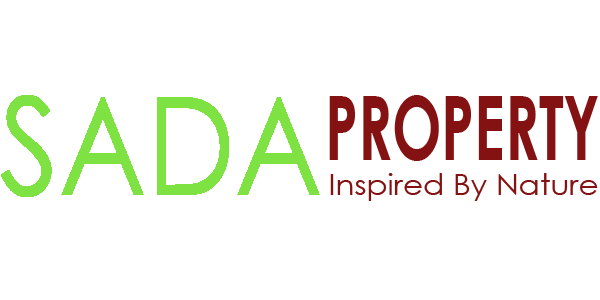
<style>
.page{position:relative;width:600px;height:300px;background:#ffffff}
.page>*{position:absolute;margin:0}
.t1{font:89.1px "CenturyGothic-Bold";color:#851212;scale:0.66 1}
.t2{font:29.4px "CenturyGothic";color:#851212;scale:1.05 1}
</style>
<div class="page">
<p class="t1" style="left:329px;top:95px;width:269px;height:66px">PROPERTY</p>
<p class="t2" style="left:330px;top:173px;width:268px;height:28px">Inspired By Nature</p>
</div>
